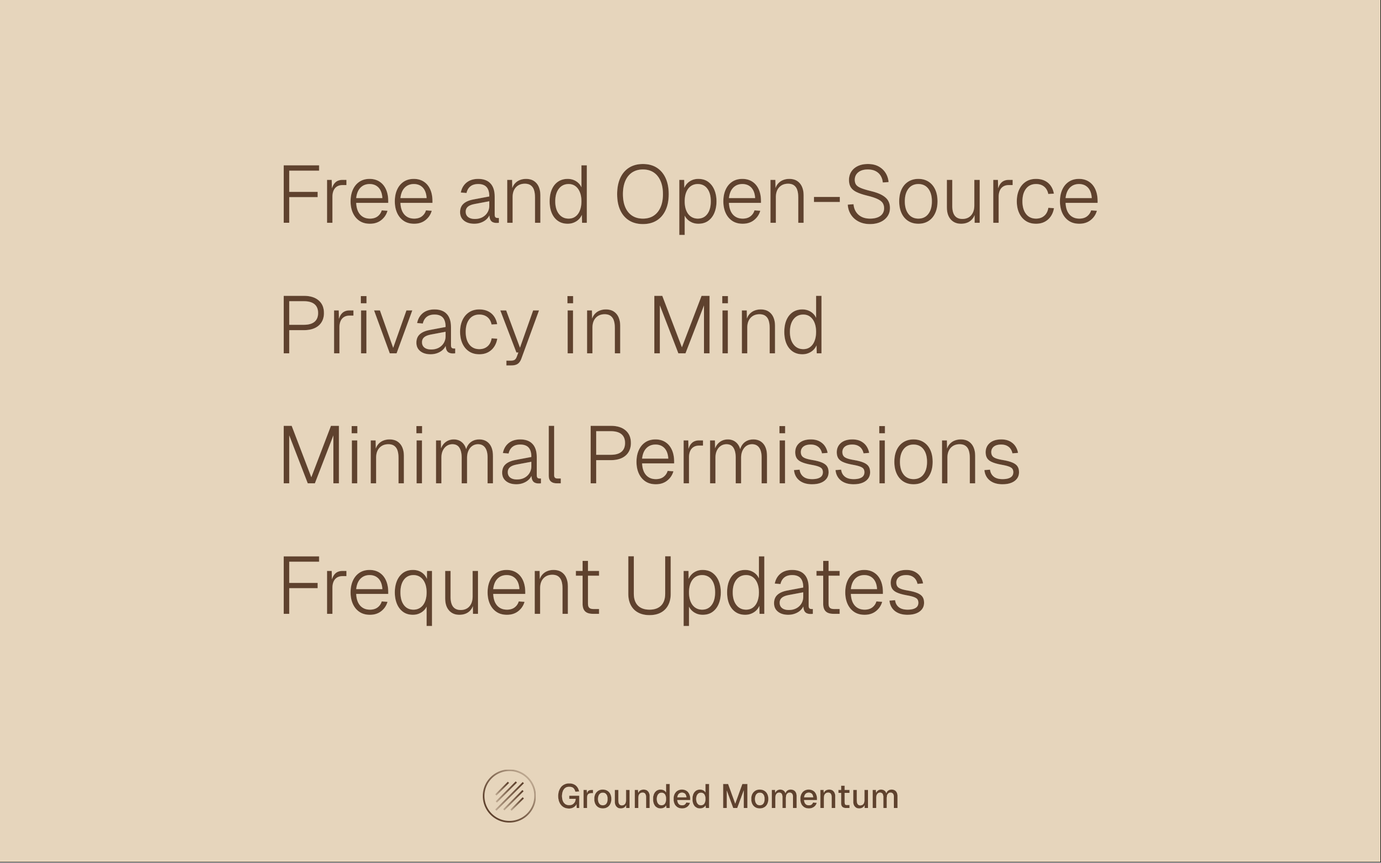
<style>
.page{position:relative;width:1381px;height:863px;background:#e6d5bc}
.page>*{position:absolute;margin:0}
.t1{font:80.9px/130.4px "Geist-Light";color:#5f422e}
.t2{font:33.8px "Geist-Medium";color:#5f422e}
</style>
<div class="page">
<p class="t1" style="left:283px;top:164px;width:815px;height:462px">Free and Open-Source<br>Privacy in Mind<br>Minimal Permissions<br>Frequent Updates</p>
<p class="t2" style="left:558px;top:783px;width:340px;height:26px">Grounded Momentum</p>
</div>
